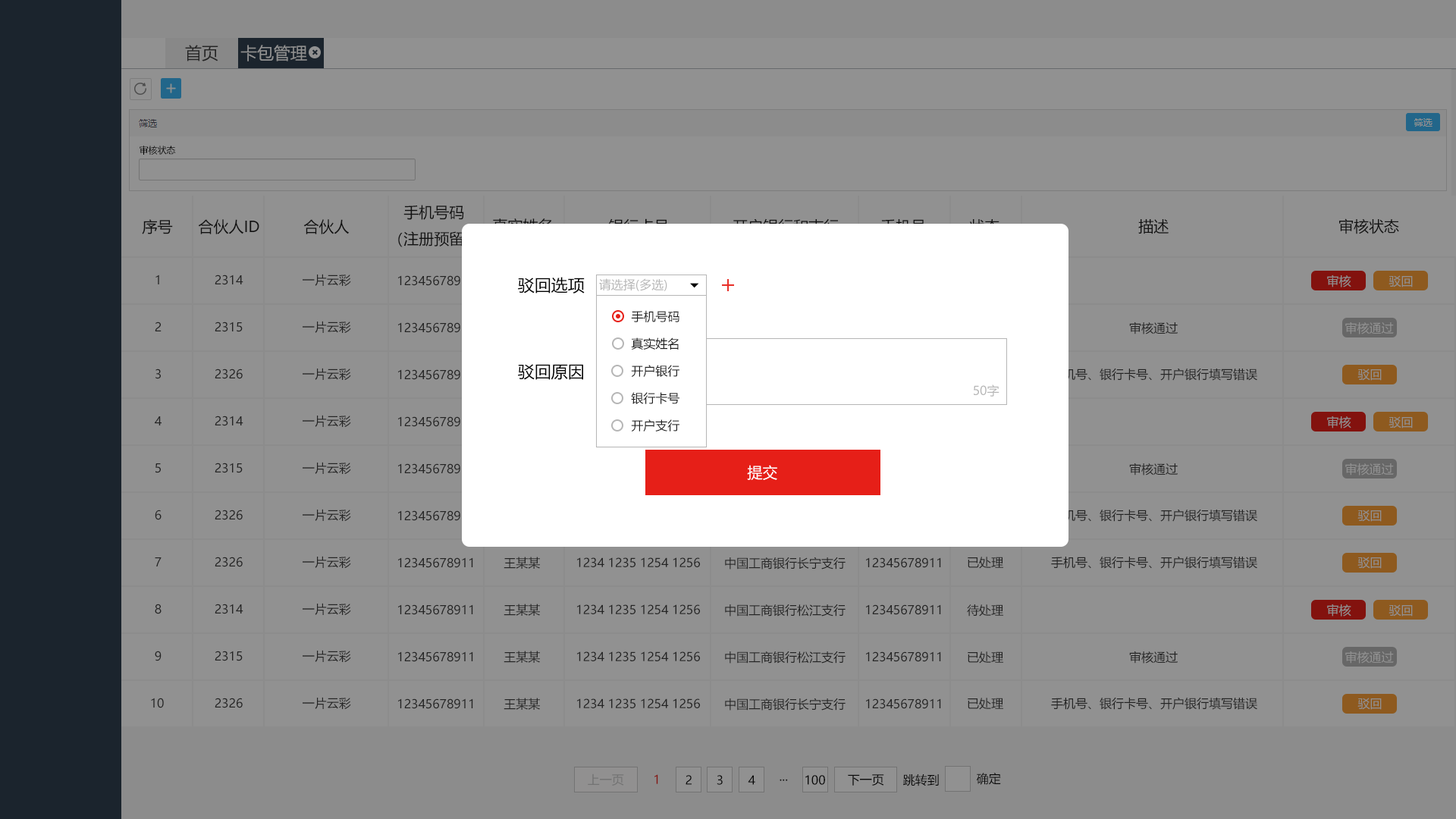
<style>
.page{position:relative;width:1456px;height:819px;background:#919191}
.page>*{position:absolute;margin:0}
.t1{font:16.7px "MicrosoftYaHei";color:#242424;text-transform:uppercase}
.t2{font:16.7px "MicrosoftYaHei";color:#919191;text-transform:uppercase}
.t3{font:9.1px "MicrosoftYaHei";color:#000000;text-transform:uppercase}
.t4{font:15.2px "MicrosoftYaHei";color:#202020;text-transform:uppercase}
.t5{font:12.1px "MicrosoftYaHei";color:#242424;text-transform:uppercase}
.t6{font:16.7px "MicrosoftYaHei";color:#000000;text-transform:uppercase}
.t7{font:12.1px "MicrosoftYaHei";color:#b6b6b6;text-transform:uppercase}
.t8{font:12.1px "MicrosoftYaHei";color:#919191;text-transform:uppercase}
.t9{font:12.1px "MicrosoftYaHei";color:#202020}
.t10{font:15.2px "MicrosoftYaHei";color:#ffffff}
.t11{font:12.1px "MicrosoftYaHei";color:#737373}
.t12{font:12.1px "MicrosoftYaHei";color:#101010}
.t13{font:12.1px "MicrosoftYaHei";color:#83120e}
</style>
<div class="page">
<p class="t1" style="left:185px;top:45px;width:33px;height:16px">首页</p>
<p class="t2" style="left:240px;top:45px;width:67px;height:16px">卡包管理</p>
<p class="t3" style="left:140px;top:146px;width:36px;height:9px">审核状态</p>
<p class="t4" style="left:398px;top:205px;width:71px;height:42px;text-align:center">手机号码<br>（注册预留）</p>
<p class="t4" style="left:142px;top:219px;width:31px;height:15px">序号</p>
<p class="t4" style="left:198px;top:219px;width:61px;height:15px">合伙人ID</p>
<p class="t4" style="left:303px;top:219px;width:47px;height:15px">合伙人</p>
<p class="t4" style="left:1138px;top:219px;width:31px;height:15px">描述</p>
<p class="t4" style="left:1339px;top:218px;width:60px;height:16px">审核状态</p>
<p class="t5" style="left:155px;top:275px;width:4px;height:9px">1</p>
<p class="t5" style="left:215px;top:275px;width:28px;height:10px">2314</p>
<p class="t5" style="left:303px;top:274px;width:48px;height:12px">一片云彩</p>
<p class="t5" style="left:398px;top:275px;width:75px;height:11px">12345678911</p>
<p class="t6" style="left:518px;top:277px;width:67px;height:16px">驳回选项</p>
<p class="t7" style="left:599px;top:278px;width:68px;height:13px">请选择(多选)</p>
<p class="t8" style="left:1327px;top:275px;width:24px;height:12px">审核</p>
<p class="t8" style="left:1388px;top:275px;width:25px;height:12px">驳回</p>
<p class="t9" style="left:631px;top:310px;width:48px;height:13px">手机号码</p>
<p class="t5" style="left:155px;top:322px;width:7px;height:9px">2</p>
<p class="t5" style="left:215px;top:322px;width:28px;height:10px">2315</p>
<p class="t5" style="left:303px;top:321px;width:48px;height:12px">一片云彩</p>
<p class="t5" style="left:398px;top:322px;width:75px;height:11px">12345678911</p>
<p class="t5" style="left:1129px;top:322px;width:49px;height:12px">审核通过</p>
<p class="t8" style="left:1345px;top:322px;width:49px;height:12px">审核通过</p>
<p class="t9" style="left:631px;top:337px;width:48px;height:13px">真实姓名</p>
<p class="t6" style="left:518px;top:364px;width:65px;height:16px">驳回原因</p>
<p class="t9" style="left:631px;top:365px;width:48px;height:12px">开户银行</p>
<p class="t5" style="left:155px;top:369px;width:6px;height:10px">3</p>
<p class="t5" style="left:215px;top:369px;width:28px;height:10px">2326</p>
<p class="t5" style="left:303px;top:368px;width:48px;height:12px">一片云彩</p>
<p class="t5" style="left:398px;top:369px;width:75px;height:11px">12345678911</p>
<p class="t5" style="left:1051px;top:368px;width:206px;height:13px">手机号、银行卡号、开户银行填写错误</p>
<p class="t8" style="left:1357px;top:369px;width:25px;height:12px">驳回</p>
<p class="t7" style="left:974px;top:384px;width:25px;height:13px">50字</p>
<p class="t9" style="left:631px;top:392px;width:48px;height:12px">银行卡号</p>
<p class="t5" style="left:155px;top:416px;width:7px;height:9px">4</p>
<p class="t5" style="left:215px;top:416px;width:28px;height:10px">2314</p>
<p class="t5" style="left:303px;top:415px;width:48px;height:12px">一片云彩</p>
<p class="t5" style="left:398px;top:416px;width:75px;height:11px">12345678911</p>
<p class="t9" style="left:631px;top:419px;width:48px;height:12px">开户支行</p>
<p class="t8" style="left:1327px;top:416px;width:24px;height:12px">审核</p>
<p class="t8" style="left:1388px;top:416px;width:25px;height:12px">驳回</p>
<p class="t5" style="left:303px;top:462px;width:48px;height:12px">一片云彩</p>
<p class="t5" style="left:155px;top:463px;width:6px;height:10px">5</p>
<p class="t5" style="left:215px;top:463px;width:28px;height:10px">2315</p>
<p class="t5" style="left:398px;top:463px;width:75px;height:11px">12345678911</p>
<p class="t10" style="left:747px;top:465px;width:30px;height:15px">提交</p>
<p class="t5" style="left:1129px;top:463px;width:49px;height:12px">审核通过</p>
<p class="t8" style="left:1345px;top:463px;width:49px;height:12px">审核通过</p>
<p class="t5" style="left:155px;top:510px;width:7px;height:10px">6</p>
<p class="t5" style="left:215px;top:510px;width:28px;height:10px">2326</p>
<p class="t5" style="left:303px;top:509px;width:48px;height:12px">一片云彩</p>
<p class="t5" style="left:1051px;top:509px;width:206px;height:13px">手机号、银行卡号、开户银行填写错误</p>
<p class="t8" style="left:1357px;top:510px;width:25px;height:12px">驳回</p>
<p class="t5" style="left:398px;top:510px;width:75px;height:11px">12345678911</p>
<p class="t5" style="left:155px;top:557px;width:7px;height:9px">7</p>
<p class="t5" style="left:215px;top:557px;width:28px;height:10px">2326</p>
<p class="t5" style="left:303px;top:556px;width:48px;height:12px">一片云彩</p>
<p class="t5" style="left:398px;top:557px;width:75px;height:11px">12345678911</p>
<p class="t5" style="left:504px;top:557px;width:36px;height:12px">王某某</p>
<p class="t5" style="left:577px;top:557px;width:123px;height:10px">1234 1235 1254 1256</p>
<p class="t5" style="left:725px;top:557px;width:121px;height:13px">中国工商银行长宁支行</p>
<p class="t5" style="left:866px;top:557px;width:75px;height:11px">12345678911</p>
<p class="t5" style="left:968px;top:557px;width:35px;height:12px">已处理</p>
<p class="t5" style="left:1051px;top:556px;width:206px;height:13px">手机号、银行卡号、开户银行填写错误</p>
<p class="t8" style="left:1357px;top:557px;width:25px;height:12px">驳回</p>
<p class="t5" style="left:155px;top:604px;width:7px;height:10px">8</p>
<p class="t5" style="left:215px;top:604px;width:28px;height:10px">2314</p>
<p class="t5" style="left:303px;top:603px;width:48px;height:12px">一片云彩</p>
<p class="t5" style="left:398px;top:604px;width:75px;height:11px">12345678911</p>
<p class="t5" style="left:504px;top:604px;width:36px;height:12px">王某某</p>
<p class="t5" style="left:577px;top:604px;width:123px;height:10px">1234 1235 1254 1256</p>
<p class="t5" style="left:725px;top:604px;width:121px;height:13px">中国工商银行松江支行</p>
<p class="t5" style="left:866px;top:604px;width:75px;height:11px">12345678911</p>
<p class="t5" style="left:967px;top:604px;width:36px;height:13px">待处理</p>
<p class="t8" style="left:1327px;top:604px;width:24px;height:13px">审核</p>
<p class="t8" style="left:1388px;top:604px;width:25px;height:13px">驳回</p>
<p class="t5" style="left:155px;top:651px;width:7px;height:10px">9</p>
<p class="t5" style="left:215px;top:651px;width:28px;height:10px">2315</p>
<p class="t5" style="left:303px;top:650px;width:48px;height:12px">一片云彩</p>
<p class="t5" style="left:398px;top:651px;width:75px;height:11px">12345678911</p>
<p class="t5" style="left:504px;top:651px;width:36px;height:12px">王某某</p>
<p class="t5" style="left:577px;top:651px;width:123px;height:10px">1234 1235 1254 1256</p>
<p class="t5" style="left:725px;top:651px;width:121px;height:13px">中国工商银行松江支行</p>
<p class="t5" style="left:866px;top:651px;width:75px;height:11px">12345678911</p>
<p class="t5" style="left:968px;top:651px;width:35px;height:13px">已处理</p>
<p class="t5" style="left:1129px;top:651px;width:49px;height:13px">审核通过</p>
<p class="t8" style="left:1345px;top:651px;width:49px;height:13px">审核通过</p>
<p class="t5" style="left:151px;top:698px;width:13px;height:10px">10</p>
<p class="t5" style="left:215px;top:698px;width:28px;height:10px">2326</p>
<p class="t5" style="left:303px;top:697px;width:48px;height:12px">一片云彩</p>
<p class="t5" style="left:398px;top:698px;width:75px;height:11px">12345678911</p>
<p class="t5" style="left:504px;top:698px;width:36px;height:12px">王某某</p>
<p class="t5" style="left:577px;top:698px;width:123px;height:10px">1234 1235 1254 1256</p>
<p class="t5" style="left:725px;top:698px;width:121px;height:13px">中国工商银行长宁支行</p>
<p class="t5" style="left:866px;top:698px;width:75px;height:11px">12345678911</p>
<p class="t5" style="left:968px;top:698px;width:35px;height:12px">已处理</p>
<p class="t5" style="left:1051px;top:697px;width:206px;height:13px">手机号、银行卡号、开户银行填写错误</p>
<p class="t8" style="left:1357px;top:698px;width:25px;height:12px">驳回</p>
<p class="t11" style="left:588px;top:773px;width:36px;height:13px">上一页</p>
<p class="t12" style="left:976px;top:773px;width:25px;height:12px">确定</p>
<p class="t13" style="left:654px;top:774px;width:4px;height:10px">1</p>
<p class="t12" style="left:686px;top:775px;width:6px;height:10px">2</p>
<p class="t12" style="left:717px;top:775px;width:6px;height:10px">3</p>
<p class="t12" style="left:748px;top:775px;width:7px;height:10px">4</p>
<p class="t12" style="left:780px;top:779px;width:8px;height:2px">...</p>
<p class="t12" style="left:805px;top:775px;width:20px;height:10px">100</p>
<p class="t12" style="left:848px;top:774px;width:36px;height:12px">下一页</p>
<p class="t12" style="left:903px;top:774px;width:36px;height:12px">跳转到</p>
</div>
